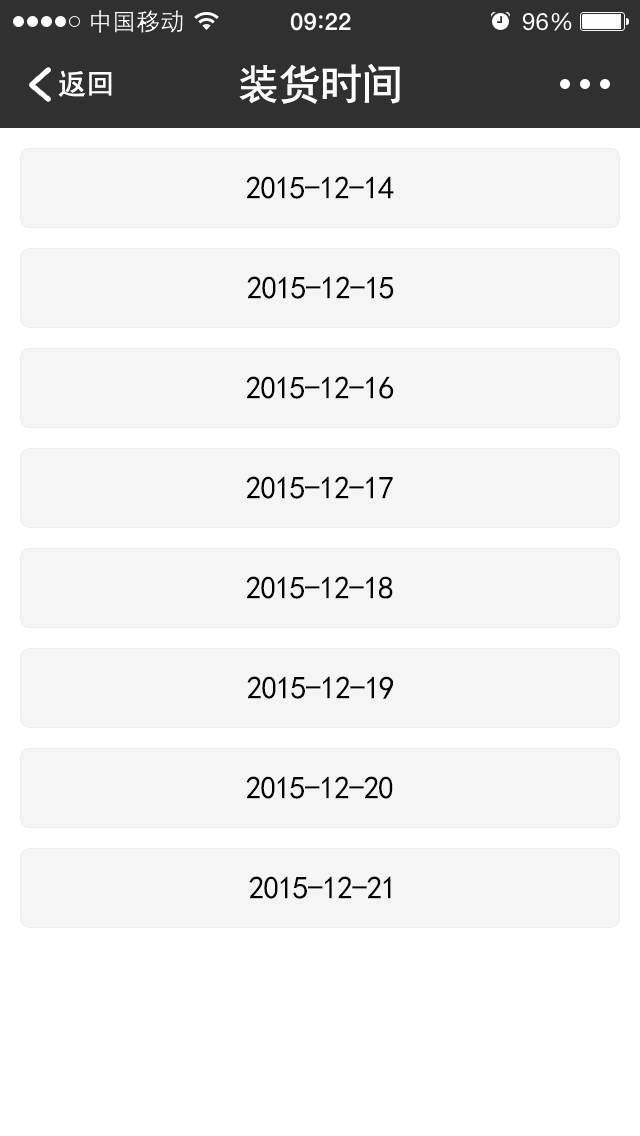
<style>
.page{position:relative;width:640px;height:1136px;background:#f5f5f5}
.page>*{position:absolute;margin:0}
.t1{font:42px "SimHei";letter-spacing:-0.04em;color:#ffffff;font-weight:bold}
.t2{font:28px "SimHei";color:#ffffff;font-weight:bold}
.t3{font:32px "SimHei";letter-spacing:-0.04em;color:#000000}
</style>
<div class="page">
<p class="t1" style="left:239px;top:64px;width:161px;height:40px">装货时间</p>
<p class="t2" style="left:58px;top:70px;width:54px;height:27px">返回</p>
<p class="t3" style="left:246px;top:176px;width:148px;height:23px">2015-12-14</p>
<p class="t3" style="left:247px;top:276px;width:147px;height:23px">2015-12-15</p>
<p class="t3" style="left:246px;top:376px;width:148px;height:23px">2015-12-16</p>
<p class="t3" style="left:246px;top:476px;width:147px;height:23px">2015-12-17</p>
<p class="t3" style="left:246px;top:576px;width:147px;height:23px">2015-12-18</p>
<p class="t3" style="left:247px;top:676px;width:146px;height:23px">2015-12-19</p>
<p class="t3" style="left:246px;top:776px;width:147px;height:23px">2015-12-20</p>
<p class="t3" style="left:249px;top:876px;width:142px;height:23px">2015-12-21</p>
</div>
